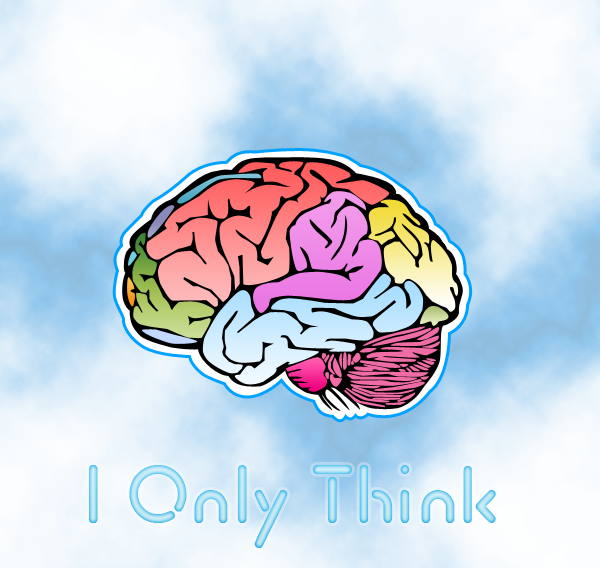
<style>
.page{position:relative;width:600px;height:568px}
.page>*{position:absolute;margin:0}
.t1{font:72px "TomorrowPeople"}
</style>
<div class="page">
<p class="t1" style="left:89px;top:465px;width:407px;height:83px">I Only Think</p>
</div>
